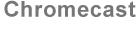
<style>
.page{position:relative;width:140px;height:30px;background:#ffffff}
.page>*{position:absolute;margin:0}
.t1{font:22px "Arial-BoldMT";letter-spacing:0.025em;color:#767676}
</style>
<div class="page">
<p class="t1" style="left:4px;top:0px;width:132px;height:17px">Chromecast</p>
</div>
